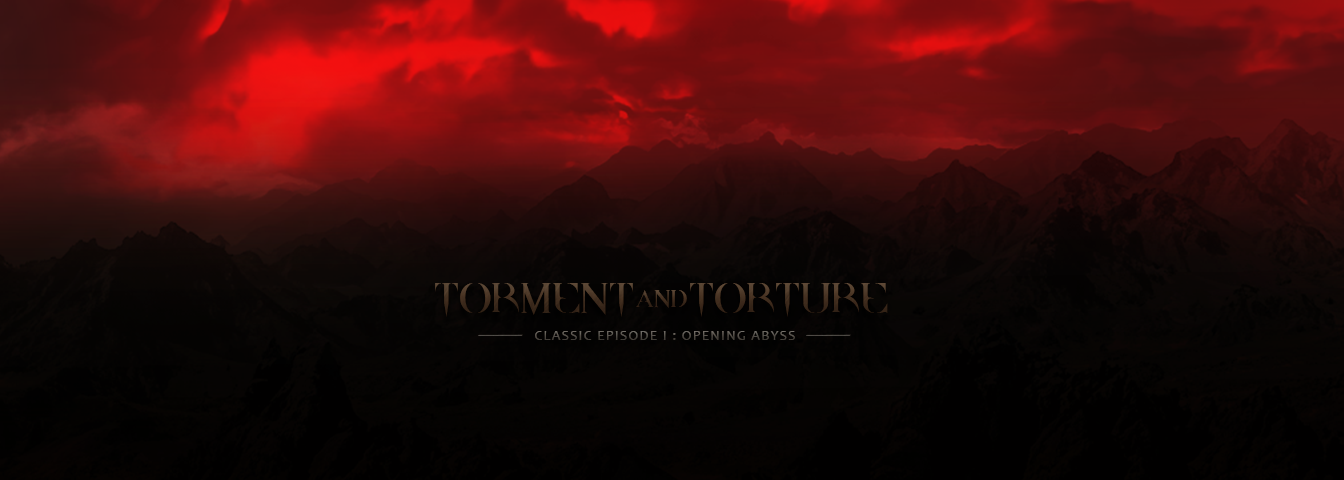
<style>
.page{position:relative;width:1344px;height:480px}
.page>*{position:absolute;margin:0}
.t1{font:37.2px "DpQuake";color:#4f3b2b}
.t2{font:21.4px "DpQuake";color:#4f3b2b}
.t3{font:18.1px "Candara";letter-spacing:0.1em;color:#4f4a46;scale:11.5 1}
.t4{font:13.9px "Candara";letter-spacing:0.1em}
.t5{font:18.1px "Candara";letter-spacing:0.1em;color:#4e4a45;scale:11.5 1}
</style>
<div class="page">
<p class="t1" style="left:435px;top:283px;width:453px;height:34px">TORMENT   TORTURE</p>
<p class="t2" style="left:636px;top:290px;width:51px;height:18px">AND</p>
<p class="t3" style="left:477px;top:334px;width:46px;height:2px">-</p>
<p class="t4" style="left:535px;top:331px;width:260px;height:9px">CLASSIC EPISODE I : OPENING ABYSS</p>
<p class="t5" style="left:805px;top:334px;width:46px;height:2px">-</p>
</div>
